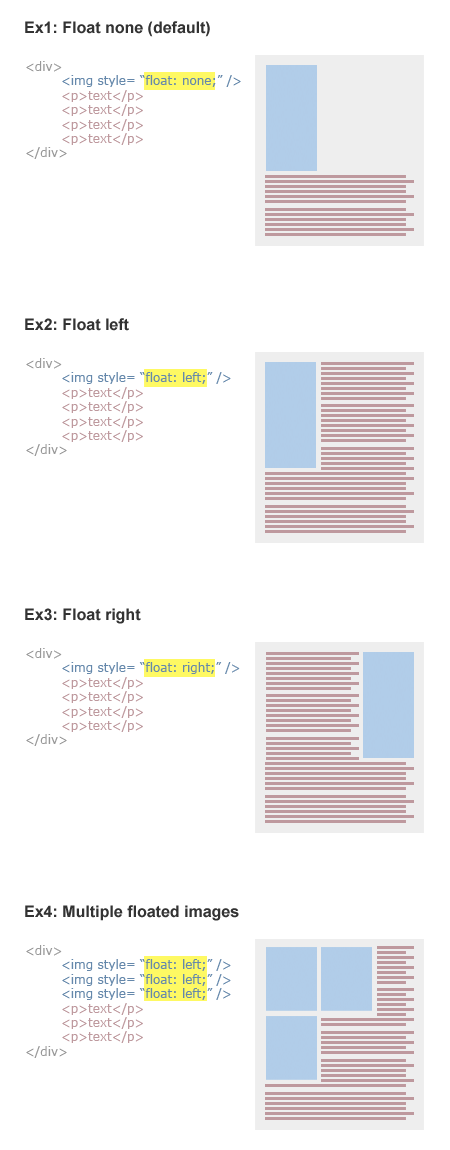
<style>
.page{position:relative;width:450px;height:1150px;background:#ffffff}
.page>*{position:absolute;margin:0}
.t1{font:16px "Arial-BoldMT";color:#333333}
.t2{font:12px "Verdana";color:#be999e}
.t3{font:12px "Verdana";color:#999999}
.t4{font:12px "Verdana";color:#6588ab}
</style>
<div class="page">
<p class="t1" style="left:25px;top:21px;width:185px;height:16px">Ex1: Float none (default)</p>
<p class="t2" style="left:26px;top:61px;width:215px;height:98px"><span class="t3">&lt;div&gt;<br> </span><span class="t4">&lt;img style= “float: none;” /&gt;<br></span> &lt;p&gt;text&lt;/p&gt;<br> &lt;p&gt;text&lt;/p&gt;<br> &lt;p&gt;text&lt;/p&gt;<br> &lt;p&gt;text&lt;/p&gt;<br><span class="t3">&lt;/div&gt;</span></p>
<p class="t1" style="left:25px;top:318px;width:104px;height:13px">Ex2: Float left</p>
<p class="t2" style="left:26px;top:358px;width:205px;height:98px"><span class="t3">&lt;div&gt;<br> </span><span class="t4">&lt;img style= “float: left;” /&gt;<br></span> &lt;p&gt;text&lt;/p&gt;<br> &lt;p&gt;text&lt;/p&gt;<br> &lt;p&gt;text&lt;/p&gt;<br> &lt;p&gt;text&lt;/p&gt;<br><span class="t3">&lt;/div&gt;</span></p>
<p class="t1" style="left:25px;top:608px;width:116px;height:16px">Ex3: Float right</p>
<p class="t2" style="left:26px;top:648px;width:214px;height:98px"><span class="t3">&lt;div&gt;<br> </span><span class="t4">&lt;img style= “float: right;” /&gt;<br></span> &lt;p&gt;text&lt;/p&gt;<br> &lt;p&gt;text&lt;/p&gt;<br> &lt;p&gt;text&lt;/p&gt;<br> &lt;p&gt;text&lt;/p&gt;<br><span class="t3">&lt;/div&gt;</span></p>
<p class="t1" style="left:25px;top:905px;width:214px;height:16px">Ex4: Multiple floated images</p>
<p class="t4" style="left:26px;top:945px;width:205px;height:113px"><span class="t3">&lt;div&gt;<br> </span>&lt;img style= “float: left;” /&gt;<br> &lt;img style= “float: left;” /&gt;<br> &lt;img style= “float: left;” /&gt;<br><span class="t2"> &lt;p&gt;text&lt;/p&gt;<br> &lt;p&gt;text&lt;/p&gt;<br> &lt;p&gt;text&lt;/p&gt;<br></span><span class="t3">&lt;/div&gt;</span></p>
</div>
